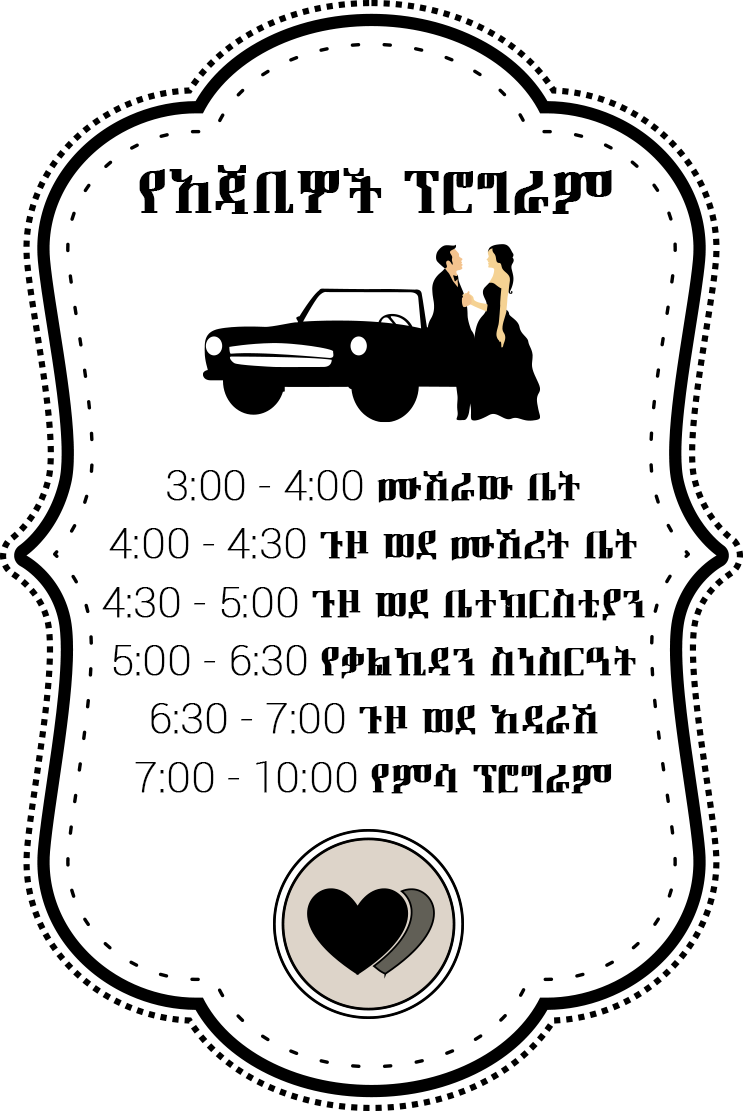
<style>
.page{position:relative;width:743px;height:1112px;background:#ffffff}
.page>*{position:absolute;margin:0}
.t1{font:62.5px "EthiopicFantuwua";color:#000000;font-weight:bold}
.t2{font:41.7px/58.3px "EthiopicFantuwua";color:#000000;font-weight:bold}
.t3{font:41.7px/58.3px "Roboto-Thin";color:#000000;font-weight:bold}
</style>
<div class="page">
<p class="t1" style="left:139px;top:165px;width:473px;height:50px">የአጃቢዎች ፕሮግራም</p>
<p class="t2" style="left:102px;top:470px;width:543px;height:324px;text-align:center"><span class="t3">3:00 - 4:00 </span>ሙሽራው ቤት<br><span class="t3">4:00 - 4:30 </span>ጉዞ ወደ ሙሽሪት ቤት<br><span class="t3">4:30 - 5:00 </span>ጉዞ ወደ ቤተክርስቲያን<br><span class="t3">5:00 - 6:30 </span>የቃልኪዳን ስነስርዓት<br><span class="t3">6:30 - 7:00 </span>ጉዞ ወደ አዳራሽ<br><span class="t3">7:00 - 10:00 </span>የምሳ ፕሮግራም</p>
</div>
